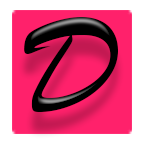
<style>
.page{position:relative;width:144px;height:144px;background:#ffffff}
.page>*{position:absolute;margin:0}
.t1{font:143.1px "BrushScriptMT";color:#000000}
</style>
<div class="page">
<p class="t1" style="left:24px;top:17px;width:94px;height:95px">D</p>
</div>
